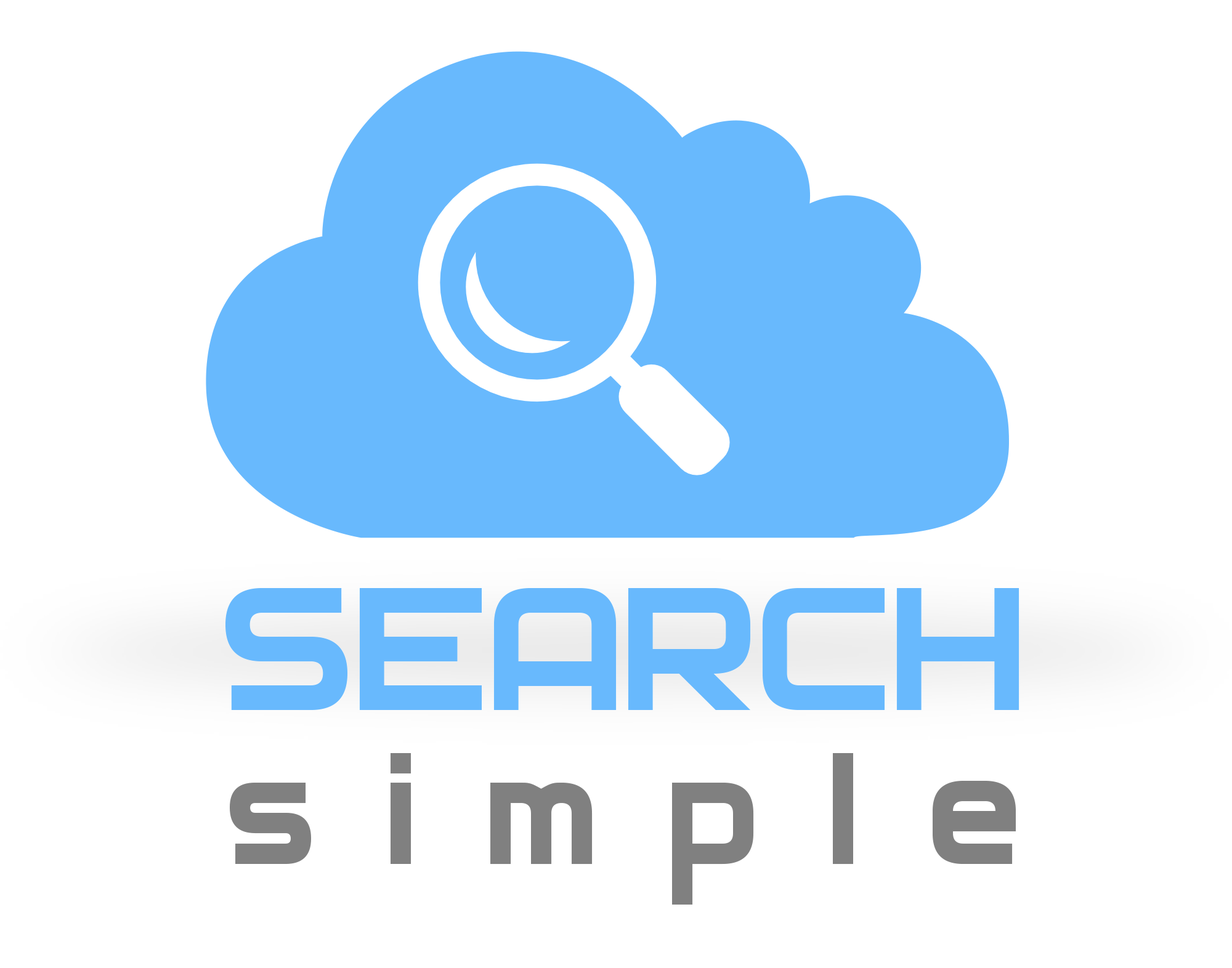
<style>
.page{position:relative;width:1232px;height:968px;background:#ffffff}
.page>*{position:absolute;margin:0}
.t1{font:203.2px/154px "Archangelsk";color:#68b9fd}
.t2{font:184.7px/154px "Archangelsk";letter-spacing:0.37em;color:#808080}
</style>
<div class="page">
<p class="t1" style="left:225px;top:588px;width:794px;height:317px;text-align:center">SEARCH<br><span class="t2">simple</span></p>
</div>
